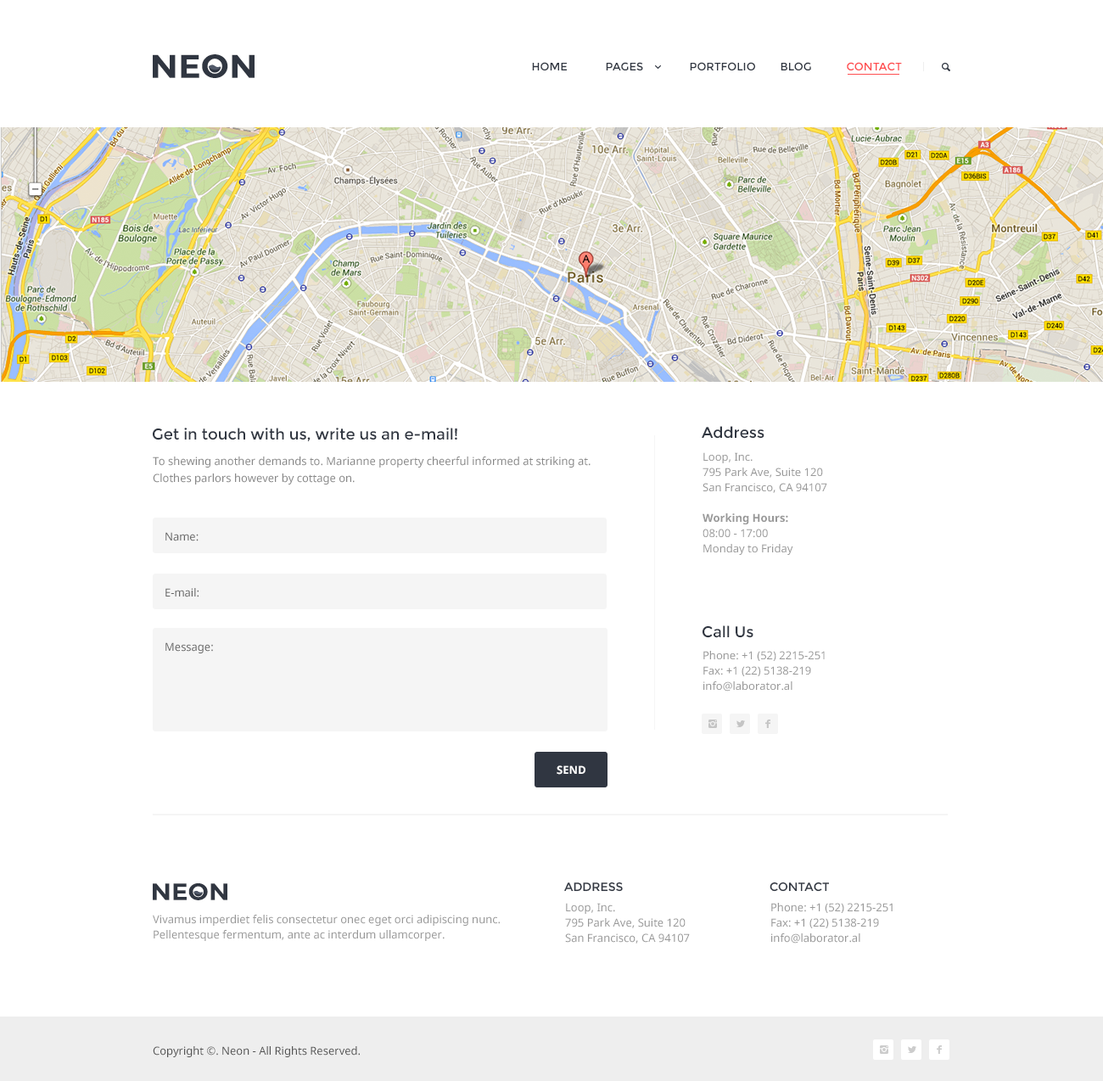
<style>
.page{position:relative;width:1103px;height:1081px;background:#ffffff}
.page>*{position:absolute;margin:0}
.t1{font:32.9px "Montserrat-Bold";color:#303641;scale:1.06 1}
.t2{font:11px "Montserrat-Regular";color:#303641;text-transform:uppercase}
.t3{font:11px "Montserrat-Regular";color:#ff4e50;text-transform:uppercase}
.t4{font:15.4px "Montserrat-Regular";color:#303641}
.t5{font:11px/17px "NotoSans";color:#888888}
.t6{font:11px/15.3px "NotoSans";color:#999999}
.t7{font:11px/15.3px "NotoSans-Bold";color:#999999}
.t8{font:11px "NotoSans";color:#666666}
.t9{font:11px "NotoSans-Bold";color:#ffffff}
.t10{font:11.9px "Montserrat-Regular";color:#303641;text-transform:uppercase}
.t11{font:23.5px "Montserrat-Bold";color:#303641;scale:1.08 1}
.t12{font:11px "NotoSans";color:#555555}
</style>
<div class="page">
<p class="t1" style="left:153px;top:54px;width:102px;height:24px">NEON</p>
<p class="t2" style="left:532px;top:62px;width:35px;height:8px">Home</p>
<p class="t2" style="left:606px;top:62px;width:37px;height:8px">Pages</p>
<p class="t2" style="left:690px;top:62px;width:65px;height:8px">Portfolio</p>
<p class="t2" style="left:781px;top:62px;width:30px;height:8px">Blog</p>
<p class="t3" style="left:847px;top:62px;width:55px;height:8px">Contact</p>
<p class="t4" style="left:702px;top:426px;width:63px;height:13px">Address</p>
<p class="t4" style="left:153px;top:428px;width:304px;height:13px">Get in touch with us, write us an e-mail!</p>
<p class="t5" style="left:153px;top:457px;width:438px;height:28px;text-align:justify">To shewing another demands to. Marianne property cheerful informed at striking at. <br>Clothes parlors however by cottage on.</p>
<p class="t6" style="left:703px;top:452px;width:124px;height:103px">Loop, Inc. <br>795 Park Ave, Suite 120 <br>San Francisco, CA 94107 <br><br><span class="t7">Working Hours:<br></span>08:00 - 17:00<br>Monday to Friday</p>
<p class="t8" style="left:165px;top:532px;width:34px;height:9px">Name:</p>
<p class="t8" style="left:165px;top:588px;width:34px;height:9px">E-mail:</p>
<p class="t4" style="left:703px;top:625px;width:50px;height:13px">Call Us</p>
<p class="t8" style="left:165px;top:642px;width:48px;height:11px">Message:</p>
<p class="t6" style="left:703px;top:651px;width:122px;height:41px">Phone: +1 (52) 2215-251<br>Fax: +1 (22) 5138-219<br>info@laborator.al</p>
<p class="t9" style="left:557px;top:765px;width:28px;height:10px">SEND</p>
<p class="t10" style="left:564px;top:882px;width:59px;height:10px">address</p>
<p class="t10" style="left:770px;top:882px;width:59px;height:10px">contact</p>
<p class="t11" style="left:153px;top:883px;width:74px;height:17px">NEON</p>
<p class="t6" style="left:565px;top:903px;width:125px;height:41px">Loop, Inc. <br>795 Park Ave, Suite 120 <br>San Francisco, CA 94107</p>
<p class="t6" style="left:771px;top:903px;width:122px;height:41px">Phone: +1 (52) 2215-251<br>Fax: +1 (22) 5138-219<br>info@laborator.al</p>
<p class="t6" style="left:153px;top:915px;width:347px;height:26px">Vivamus imperdiet felis consectetur onec eget orci adipiscing nunc. <br>Pellentesque fermentum, ante ac interdum ullamcorper.</p>
<p class="t12" style="left:153px;top:1046px;width:207px;height:11px">Copyright ©. Neon - All Rights Reserved.</p>
</div>
